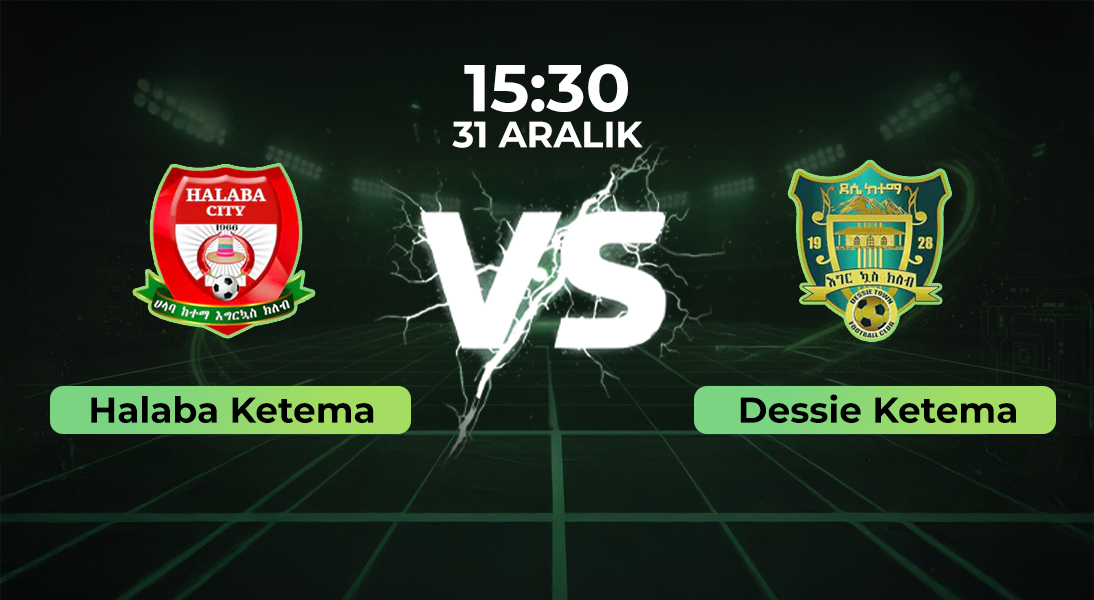
<style>
.page{position:relative;width:1094px;height:600px}
.page>*{position:absolute;margin:0}
.t1{font:66.1px "Montserrat-Bold";color:#ffffff}
.t2{font:36.5px "Montserrat-Bold";color:#ffffff}
.t3{font:36px "Montserrat-Bold";color:#000000}
</style>
<div class="page">
<p class="t1" style="left:464px;top:64px;width:164px;height:48px">15:30</p>
<p class="t2" style="left:452px;top:121px;width:191px;height:27px">31 ARALIK</p>
<p class="t3" style="left:91px;top:396px;width:283px;height:27px">Halaba Ketema</p>
<p class="t3" style="left:740px;top:394px;width:276px;height:29px">Dessie Ketema</p>
</div>
